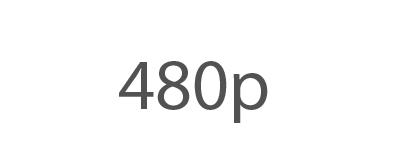
<style>
.page{position:relative;width:396px;height:162px;background:#ffffff}
.page>*{position:absolute;margin:0}
.t1{font:72px "MyriadPro-Regular";color:#525252}
</style>
<div class="page">
<p class="t1" style="left:119px;top:61px;width:149px;height:62px">480p</p>
</div>
